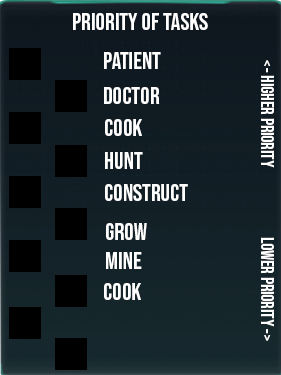
<style>
.page{position:relative;width:281px;height:375px}
.page>*{position:absolute;margin:0}
.t1{font:24px "BebasNeue-Regular";color:#ffffff}
.t2{font:18px "BebasNeue-Regular";color:#ffffff}
</style>
<div class="page">
<p class="t1" style="left:73px;top:13px;width:135px;height:17px">Priority of tasks</p>
<p class="t1" style="left:104px;top:52px;width:57px;height:17px">patient</p>
<p class="t2" style="left:261px;top:60px;width:13px;height:281px;rotate:90deg">&lt;- Higher priority   lower priority -&gt;</p>
<p class="t1" style="left:104px;top:87px;width:56px;height:17px">doctor</p>
<p class="t1" style="left:105px;top:119px;width:37px;height:17px">cook</p>
<p class="t1" style="left:105px;top:152px;width:38px;height:17px">hunt</p>
<p class="t1" style="left:105px;top:184px;width:83px;height:17px">construct</p>
<p class="t1" style="left:106px;top:223px;width:41px;height:17px">grow</p>
<p class="t1" style="left:106px;top:252px;width:36px;height:17px">mine</p>
<p class="t1" style="left:104px;top:283px;width:37px;height:17px">cook</p>
</div>
